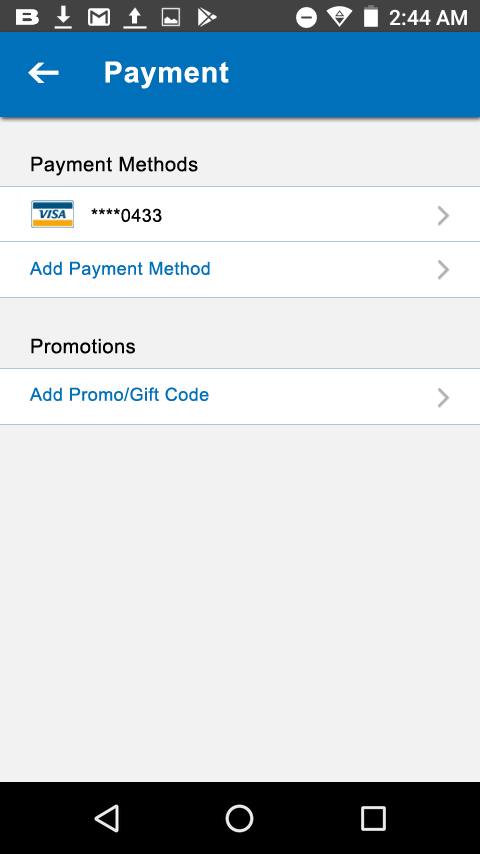
<style>
.page{position:relative;width:480px;height:854px;background:#f2f2f2}
.page>*{position:absolute;margin:0}
.t1{font:29px "Arial-BoldMT";letter-spacing:0.025em;color:#ffffff}
.t2{font:20px "ArialMT";letter-spacing:0.025em;color:#010101}
.t3{font:18px "ArialMT";letter-spacing:0.025em;color:#000000}
.t4{font:18px "ArialMT";letter-spacing:0.025em;color:#0070ba}
</style>
<div class="page">
<p class="t1" style="left:105px;top:61px;width:124px;height:28px">Payment</p>
<p class="t2" style="left:31px;top:156px;width:167px;height:20px">Payment Methods</p>
<p class="t3" style="left:91px;top:208px;width:71px;height:14px">****0433</p>
<p class="t4" style="left:29px;top:261px;width:181px;height:18px">Add Payment Method</p>
<p class="t2" style="left:31px;top:338px;width:104px;height:16px">Promotions</p>
<p class="t4" style="left:29px;top:387px;width:180px;height:14px">Add Promo/Gift Code</p>
</div>
